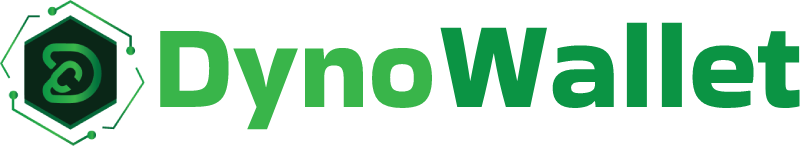
<style>
.page{position:relative;width:810px;height:150px;background:#ffffff}
.page>*{position:absolute;margin:0}
.t1{font:120px "BakbakOne-Regular";color:#39b54a}
.t2{font:125px "BakbakOne-Regular";color:#0b9444}
</style>
<div class="page">
<p class="t1" style="left:160px;top:30px;width:272px;height:100px">Dyno</p>
<p class="t2" style="left:440px;top:22px;width:360px;height:86px">Wallet</p>
</div>
